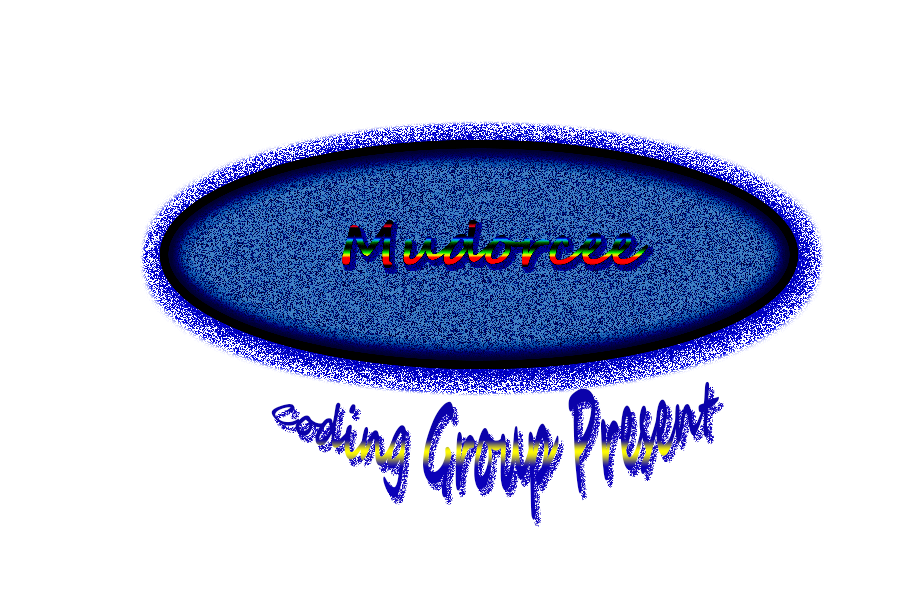
<style>
.page{position:relative;width:900px;height:600px;background:#ffffff}
.page>*{position:absolute;margin:0}
.t1{font:58.3px "SegoeScript-Bold"}
.t2{font:37.5px "SegoeScript-Bold"}
</style>
<div class="page">
<p class="t1" style="left:342px;top:220px;width:306px;height:48px">Mudorcee</p>
<p class="t2" style="left:271px;top:381px;width:448px;height:139px">Coding Group Present</p>
</div>
